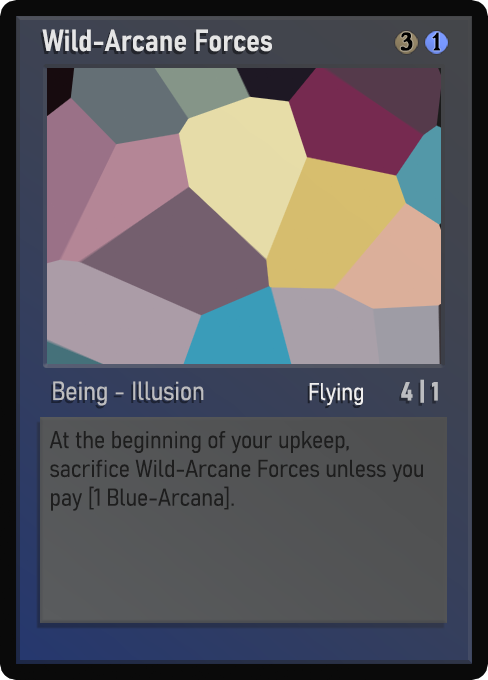
<style>
.page{position:relative;width:488px;height:680px}
.page>*{position:absolute;margin:0}
.t1{font:30px "Bahnschrift-SemiBoldSemiCondensed";color:#f2f2f2;font-weight:bold}
.t2{font:25px "WTRRoycroft";color:#000000;font-weight:bold;scale:1.09 1}
.t3{font:26px "Bahnschrift-LightSemiCondensed";color:#c8c8c8;font-weight:bold}
.t4{font:24px "Bahnschrift-LightSemiCondensed";color:#f0efef;font-weight:bold}
.t5{font:26px "Bahnschrift-BoldSemiCondensed";color:#bcbdc0;font-weight:bold}
.t6{font:24px "Bahnschrift-LightSemiCondensed";color:#1e1e1e;font-weight:bold}
</style>
<div class="page">
<p class="t1" style="left:42px;top:29px;width:230px;height:23px;opacity:0.9">Wild-Arcane Forces</p>
<p class="t2" style="left:400px;top:32px;width:13px;height:19px">3</p>
<p class="t2" style="left:432px;top:32px;width:9px;height:19px">1</p>
<p class="t3" style="left:53px;top:381px;width:151px;height:25px;opacity:0.9">Being - Illusion</p>
<p class="t4" style="left:309px;top:383px;width:54px;height:23px">Flying</p>
<p class="t5" style="left:401px;top:379px;width:37px;height:24px">4 | 1</p>
<p class="t6" style="left:49px;top:431px;width:374px;height:80px">At the beginning of your upkeep, sacrifice Wild-Arcane Forces unless you pay [1 Blue-Arcana].</p>
</div>
